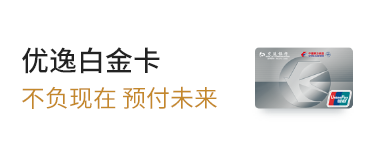
<style>
.page{position:relative;width:375px;height:156px;background:#ffffff}
.page>*{position:absolute;margin:0}
.t1{font:28px "SourceHanSansCN-Medium";color:#222222}
.t2{font:24px "SourceHanSansCN-Regular";color:#c4882b}
</style>
<div class="page">
<p class="t1" style="left:22px;top:47px;width:138px;height:27px">优逸白金卡</p>
<p class="t2" style="left:22px;top:86px;width:195px;height:23px">不负现在 预付未来</p>
</div>
